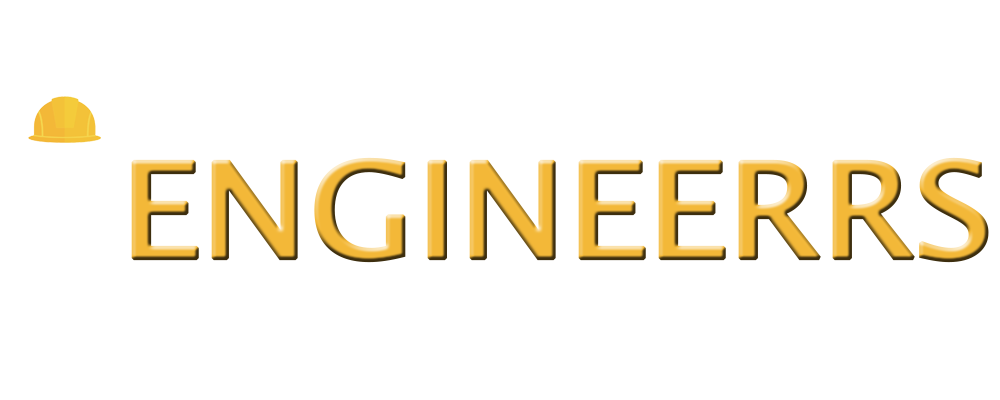
<style>
.page{position:relative;width:1000px;height:400px;background:#ffffff}
.page>*{position:absolute;margin:0}
.t1{font:133.1px "LucidaSansUnicode";letter-spacing:-0.03em;font-weight:bold;scale:1.11 1}
.t2{font:133.1px "Microsoft-Yi-Baiti";letter-spacing:-0.03em;font-weight:bold;scale:1.11 1}
</style>
<div class="page">
<p class="t1" style="left:131px;top:157px;width:858px;height:106px"><span class="t2"> </span>ENGINEERRS</p>
</div>
